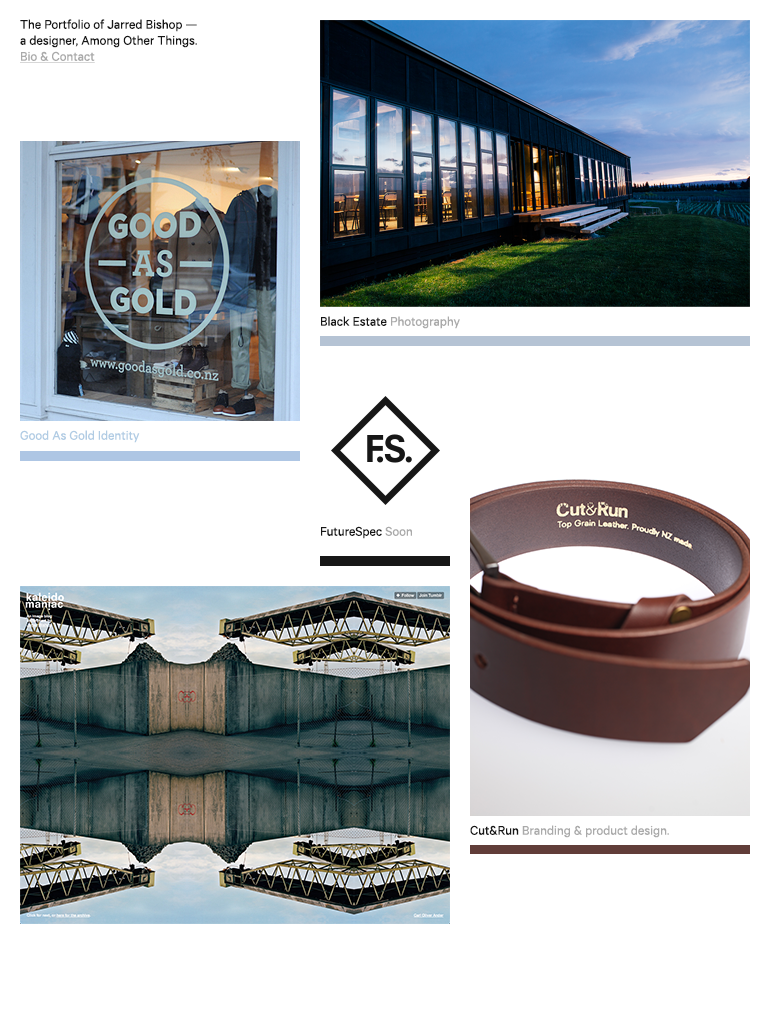
<style>
.page{position:relative;width:768px;height:1024px;background:#ffffff}
.page>*{position:absolute;margin:0}
.t1{font:14px/16px "Calibre-Regular";color:#171717}
.t2{font:14px/16px "Calibre-Regular";color:#aaaaaa;text-decoration:underline}
.t3{font:14px "Calibre-Regular";color:#171717}
.t4{font:14px "Calibre-Regular";color:#aaaaaa}
.t5{font:14px "Calibre-Regular";color:#b1cce4}
</style>
<div class="page">
<p class="t1" style="left:20px;top:19px;width:177px;height:44px">The Portfolio of Jarred Bishop — a designer, Among Other Things.<br><span class="t2">Bio &amp; Contact</span></p>
<p class="t3" style="left:321px;top:316px;width:139px;height:13px">Black Estate <span class="t4">Photography</span></p>
<p class="t5" style="left:20px;top:430px;width:120px;height:13px">Good As Gold Identity</p>
<p class="t3" style="left:321px;top:526px;width:91px;height:13px">FutureSpec <span class="t4">Soon</span></p>
<p class="t4" style="left:470px;top:825px;width:199px;height:13px"><span class="t3">Cut&amp;Run </span>Branding &amp; product design.</p>
</div>
